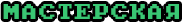
<style>
.page{position:relative;width:184px;height:24px;background:#000000}
.page>*{position:absolute;margin:0}
.t1{font:17.2px "PxPlus_IBM_BIOS";letter-spacing:0.075em;color:#39c773}
</style>
<div class="page">
<p class="t1" style="left:3px;top:4px;width:176px;height:15px">МАСТЕРСКАЯ</p>
</div>
